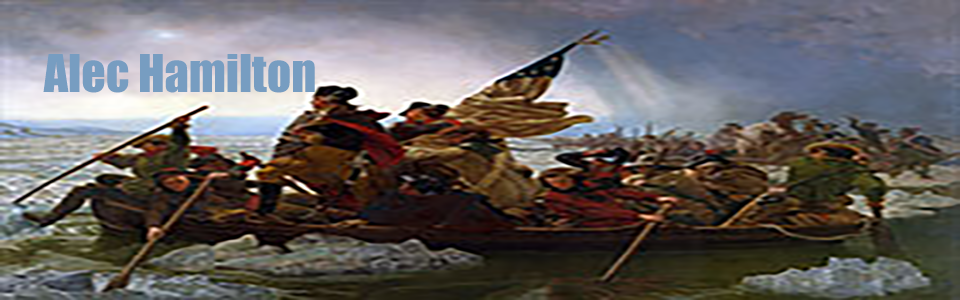
<style>
.page{position:relative;width:960px;height:300px}
.page>*{position:absolute;margin:0}
.t1{font:48px "Impact";color:#779dc1}
</style>
<div class="page">
<p class="t1" style="left:43px;top:54px;width:272px;height:39px">Alec Hamilton</p>
</div>
